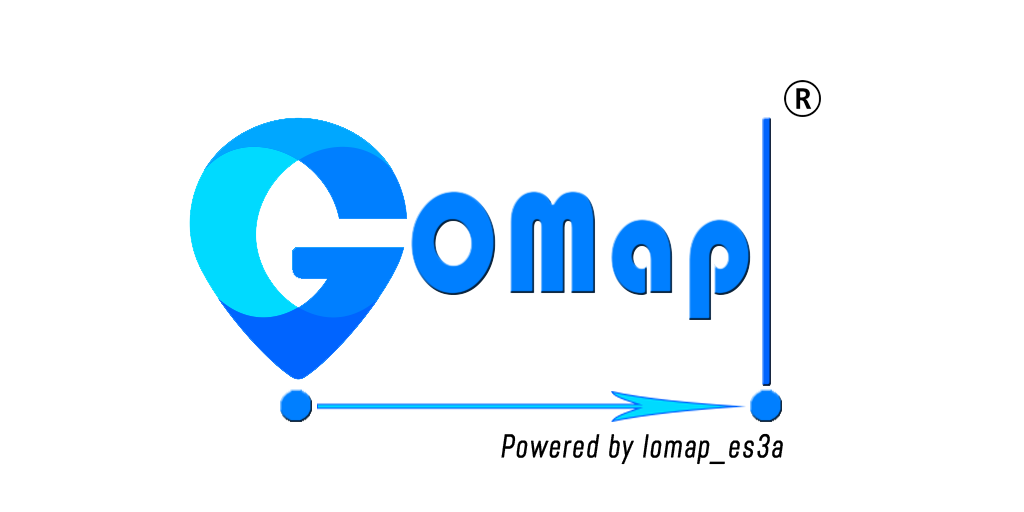
<style>
.page{position:relative;width:1024px;height:512px;background:#ffffff}
.page>*{position:absolute;margin:0}
.t1{font:150px "Bauhaus93";letter-spacing:0.05em;color:#007fff;scale:0.8 1}
.t2{font:32.5px "Abel-Regular";letter-spacing:0.05em;color:#000000;font-weight:bold;font-style:italic;scale:0.8 1}
</style>
<div class="page">
<p class="t1" style="left:411px;top:191px;width:340px;height:129px">OMap</p>
<p class="t2" style="left:501px;top:433px;width:282px;height:32px">Powered by lomap_es3a</p>
</div>
